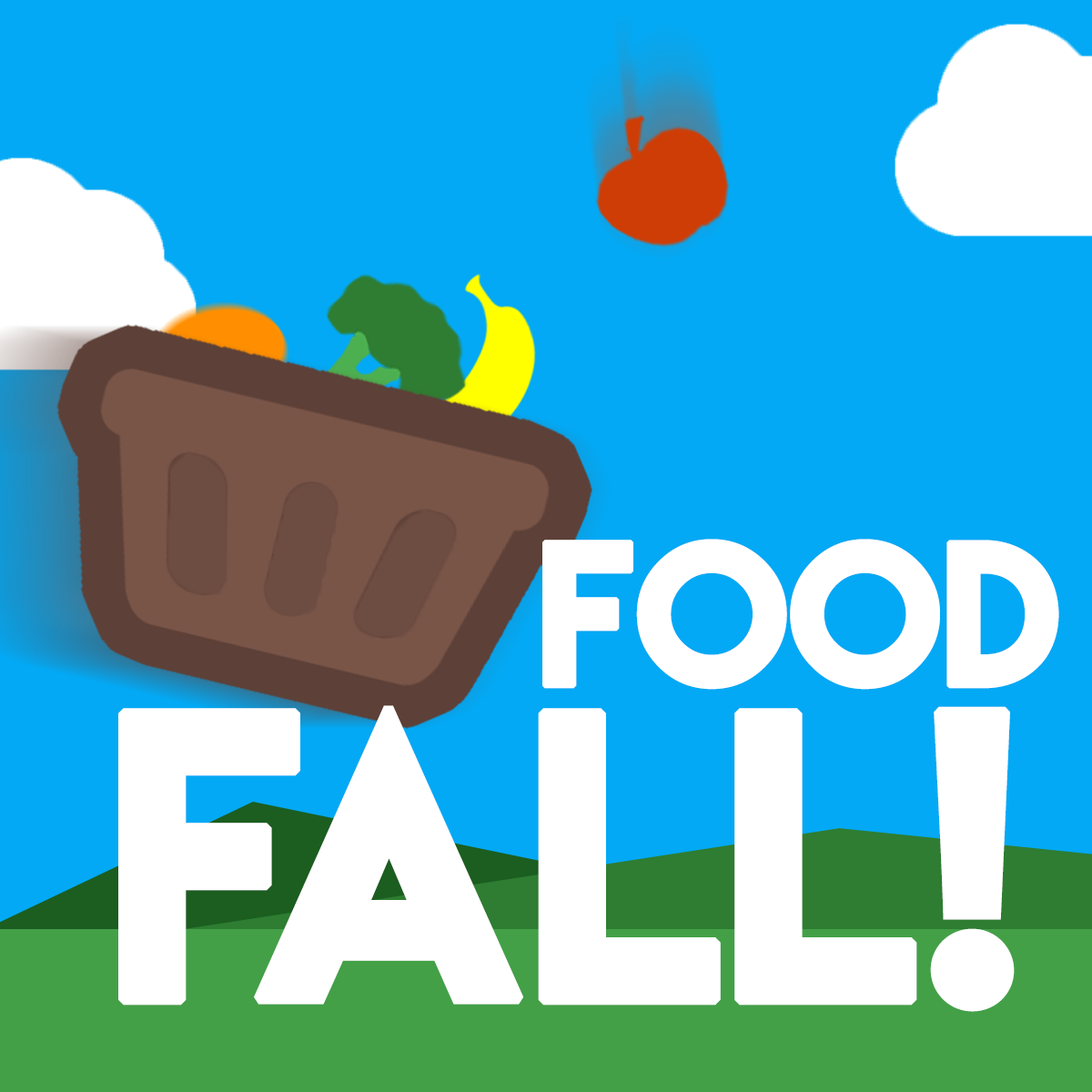
<style>
.page{position:relative;width:1092px;height:1092px;background:#03a9f4}
.page>*{position:absolute;margin:0}
.t1{font:182px "LemonMilk";letter-spacing:-0.005em;color:#ffffff;font-weight:bold}
.t2{font:364px "LemonMilk";letter-spacing:-0.005em;color:#ffffff;font-weight:bold}
</style>
<div class="page">
<p class="t1" style="left:542px;top:539px;width:517px;height:151px">food</p>
<p class="t2" style="left:118px;top:705px;width:897px;height:307px">FALL!</p>
</div>
